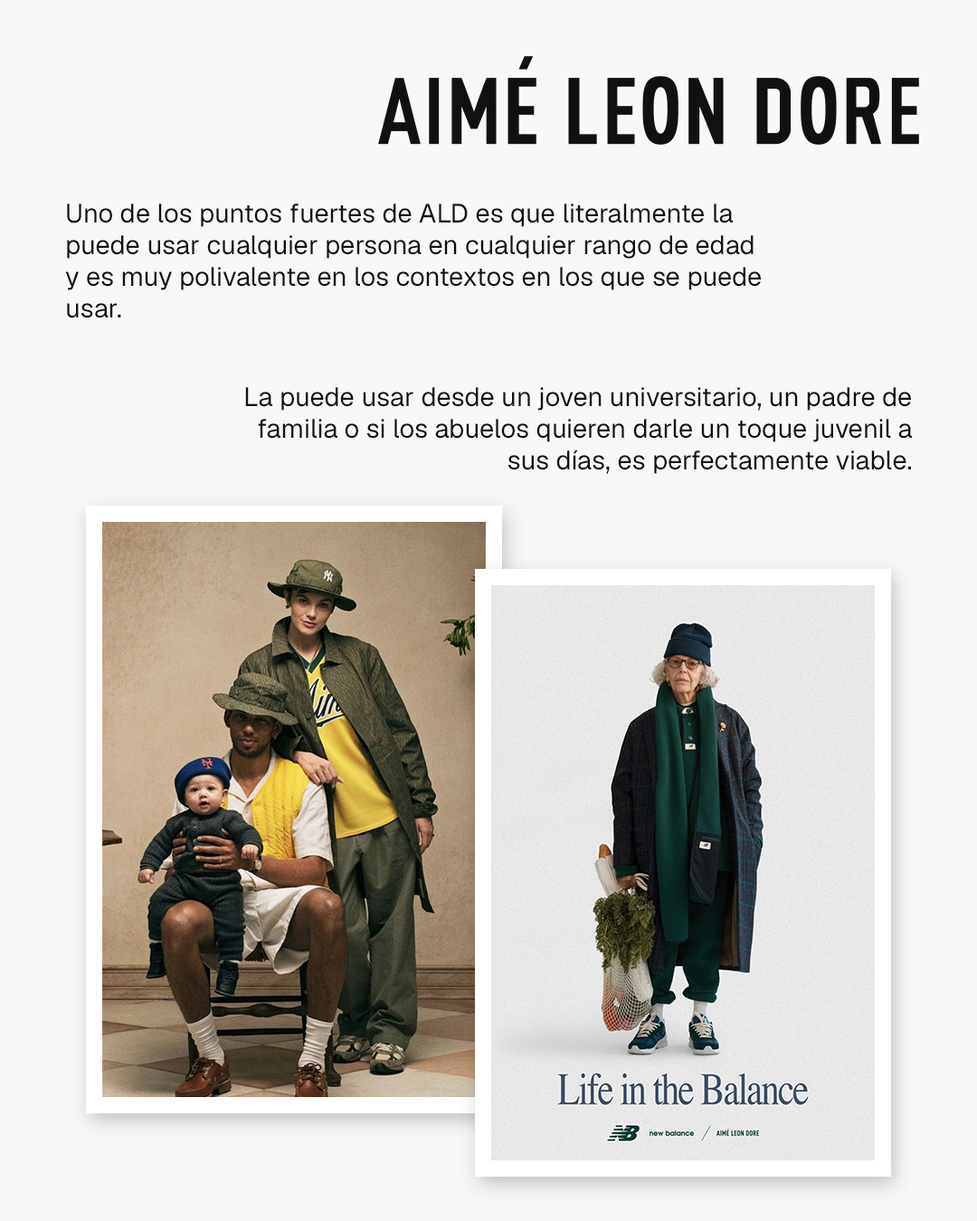
<style>
.page{position:relative;width:977px;height:1221px;background:#f8f8f8}
.page>*{position:absolute;margin:0}
.t1{font:26.4px "Geist-Regular";color:#111111}
</style>
<div class="page">
<p class="t1" style="left:65px;top:203px;width:696px;height:115px">Uno de los puntos fuertes de ALD es que literalmente la puede usar cualquier persona en cualquier rango de edad y es muy polivalente en los contextos en los que se puede usar.</p>
<p class="t1" style="left:245px;top:387px;width:667px;height:87px;text-align:right">La puede usar desde un joven universitario, un padre de familia o si los abuelos quieren darle un toque juvenil a sus días, es perfectamente viable.</p>
</div>
